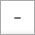
<style>
.page{position:relative;width:35px;height:35px;background:#ffffff}
.page>*{position:absolute;margin:0}
.t1{font:24px "NanumGothicBold";color:#777777}
</style>
<div class="page">
<p class="t1" style="left:14px;top:17px;width:7px;height:2px">-</p>
</div>
